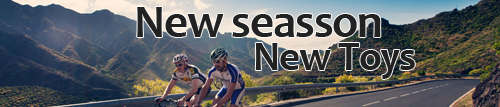
<style>
.page{position:relative;width:500px;height:107px}
.page>*{position:absolute;margin:0}
.t1{font:46.9px "Candara-Bold";letter-spacing:-0.025em;color:#222222}
.t2{font:40.7px "Candara-Bold";letter-spacing:-0.025em;color:#222222}
</style>
<div class="page">
<p class="t1" style="left:137px;top:7px;width:244px;height:30px">New seasson</p>
<p class="t2" style="left:255px;top:43px;width:160px;height:36px">New Toys</p>
</div>
